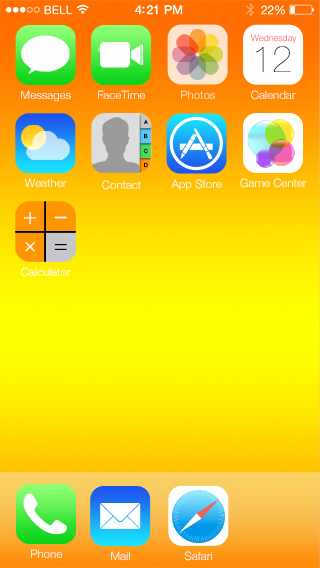
<style>
.page{position:relative;width:320px;height:568px}
.page>*{position:absolute;margin:0}
.t1{font:9px "HelveticaNeue-Light"}
.t2{font:36.5px "HelveticaNeue-UltraLight";color:#232323}
.t3{font:11.5px "HelveticaNeue-Light";color:#ffffff}
.t4{font:11.5px "HelveticaNeue-Light"}
.t5{font:5.4px "Helvetica";color:#000000}
.t6{font:5.4px "Helvetica"}
.t7{font:24px "HelveticaNeue-Light";color:#ffffff}
.t8{font:24px "HelveticaNeue-Light";color:#ffffff;scale:1.96 1}
.t9{font:24px "HelveticaNeue-Light";color:#000000}
</style>
<div class="page">
<p class="t1" style="left:250px;top:34px;width:47px;height:9px">Wednesday</p>
<p class="t2" style="left:256px;top:46px;width:35px;height:26px">12</p>
<p class="t3" style="left:21px;top:90px;width:50px;height:12px">Messages</p>
<p class="t4" style="left:98px;top:90px;width:47px;height:9px">FaceTime</p>
<p class="t4" style="left:181px;top:90px;width:34px;height:9px">Photos</p>
<p class="t3" style="left:251px;top:90px;width:45px;height:10px">Calendar</p>
<p class="t5" style="left:144px;top:119px;width:4px;height:6px">A</p>
<p class="t5" style="left:144px;top:133px;width:4px;height:6px">B</p>
<p class="t6" style="left:143px;top:148px;width:5px;height:6px">C</p>
<p class="t5" style="left:144px;top:162px;width:4px;height:6px">D</p>
<p class="t3" style="left:24px;top:178px;width:43px;height:9px">Weather</p>
<p class="t3" style="left:102px;top:180px;width:39px;height:10px">Contact</p>
<p class="t3" style="left:171px;top:179px;width:51px;height:12px">App Store</p>
<p class="t3" style="left:240px;top:178px;width:67px;height:10px">Game Center</p>
<p class="t7" style="left:24px;top:212px;width:13px;height:12px">+</p>
<p class="t8" style="left:54px;top:216px;width:13px;height:3px">-</p>
<p class="t7" style="left:25px;top:242px;width:10px;height:10px;rotate:45deg">+</p>
<p class="t9" style="left:54px;top:244px;width:13px;height:6px">=</p>
<p class="t3" style="left:21px;top:267px;width:50px;height:10px">Calculator</p>
<p class="t4" style="left:31px;top:549px;width:31px;height:9px">Phone</p>
<p class="t3" style="left:111px;top:551px;width:19px;height:9px">Mail</p>
<p class="t3" style="left:185px;top:551px;width:27px;height:10px">Safari</p>
</div>
